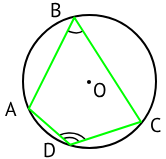
<style>
.page{position:relative;width:166px;height:159px;background:#ffffff}
.page>*{position:absolute;margin:0}
.t1{font:20px "PTSans-Regular";color:#000000}
</style>
<div class="page">
<p class="t1" style="left:51px;top:2px;width:10px;height:16px">B</p>
<p class="t1" style="left:94px;top:82px;width:12px;height:16px">O</p>
<p class="t1" style="left:5px;top:101px;width:12px;height:15px">A</p>
<p class="t1" style="left:151px;top:117px;width:10px;height:16px">C</p>
<p class="t1" style="left:44px;top:142px;width:11px;height:16px">D</p>
</div>
